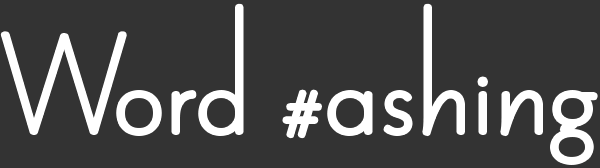
<style>
.page{position:relative;width:600px;height:168px;background:#333333}
.page>*{position:absolute;margin:0}
.t1{font:158.3px "Penna";color:#ffffff}
</style>
<div class="page">
<p class="t1" style="left:3px;top:6px;width:592px;height:156px">Word #ashing</p>
</div>
